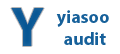
<style>
.page{position:relative;width:120px;height:54px;background:#ffffff}
.page>*{position:absolute;margin:0}
.t1{font:55.1px "MyriadPro-Bold";color:#005292}
.t2{font:18px "MyriadPro-Bold";color:#005292}
</style>
<div class="page">
<p class="t1" style="left:11px;top:8px;width:33px;height:38px">Y</p>
<p class="t2" style="left:56px;top:10px;width:53px;height:35px;text-align:center">yiasoo <br>audit</p>
</div>
